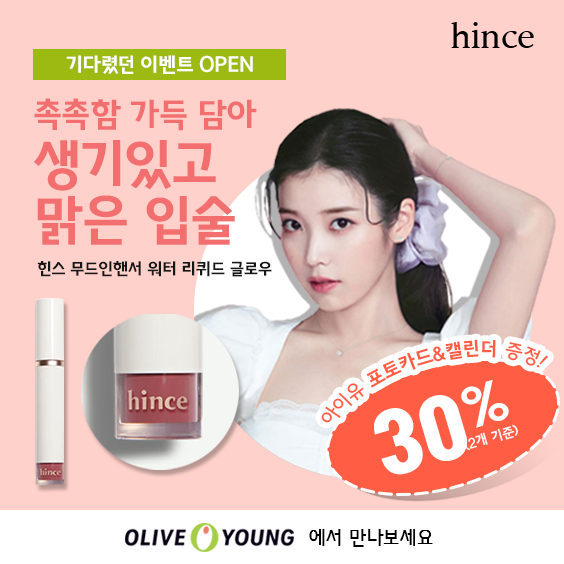
<style>
.page{position:relative;width:564px;height:564px;background:#ffd1ca}
.page>*{position:absolute;margin:0}
.t1{font:34px "Arita-buri-SemiBold_TTF";letter-spacing:-0.025em;color:#000000}
.t2{font:19.7px "KBIZgoH";letter-spacing:-0.025em;color:#ffffff;scale:1.05 1}
.t3{font:52.3px/56px "KBIZgoH";letter-spacing:-0.025em;color:#f36e6e;scale:1.05 1}
.t4{font:32.3px/56px "KBIZgoH";letter-spacing:-0.025em;color:#f36e6e;scale:1.05 1}
.t5{font:16.1px "KBIZgoH";letter-spacing:-0.025em;color:#171616;scale:1.05 1}
.t6{font:75.2px "TmonMonsoriBlack";letter-spacing:0.02em;color:#ffffff}
.t7{font:51.3px "THEJung170";letter-spacing:0.04em;color:#ffffff;scale:1.1 1}
.t8{font:12.8px "THEJung150";letter-spacing:-0.025em;color:#ffffff}
.t9{font:20px "KBIZgoM";letter-spacing:-0.025em;color:#000000}
</style>
<div class="page">
<p class="t1" style="left:451px;top:22px;width:83px;height:26px">hince</p>
<p class="t2" style="left:66px;top:55px;width:187px;height:19px">기다렸던 이벤트 OPEN</p>
<p class="t3" style="left:34px;top:98px;width:223px;height:147px"><span class="t4">촉촉함 가득 담아<br></span>생기있고<br>맑은 입술</p>
<p class="t5" style="left:37px;top:261px;width:235px;height:16px">힌스 무드인핸서 워터 리퀴드 글로우</p>
<p class="t6" style="left:374px;top:380px;width:135px;height:95px;rotate:-16deg">30<span class="t7">%</span></p>
<p class="t8" style="left:464px;top:424px;width:54px;height:27px;rotate:-16deg">(2개 기준)</p>
<p class="t9" style="left:309px;top:529px;width:124px;height:18px">에서 만나보세요</p>
</div>
